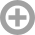
<style>
.page{position:relative;width:35px;height:35px;background:#a1a1a1}
.page>*{position:absolute;margin:0}
.t1{font:36px "ArialRoundedMTBold";color:#a1a1a1}
</style>
<div class="page">
<p class="t1" style="left:8px;top:8px;width:19px;height:19px">+</p>
</div>
